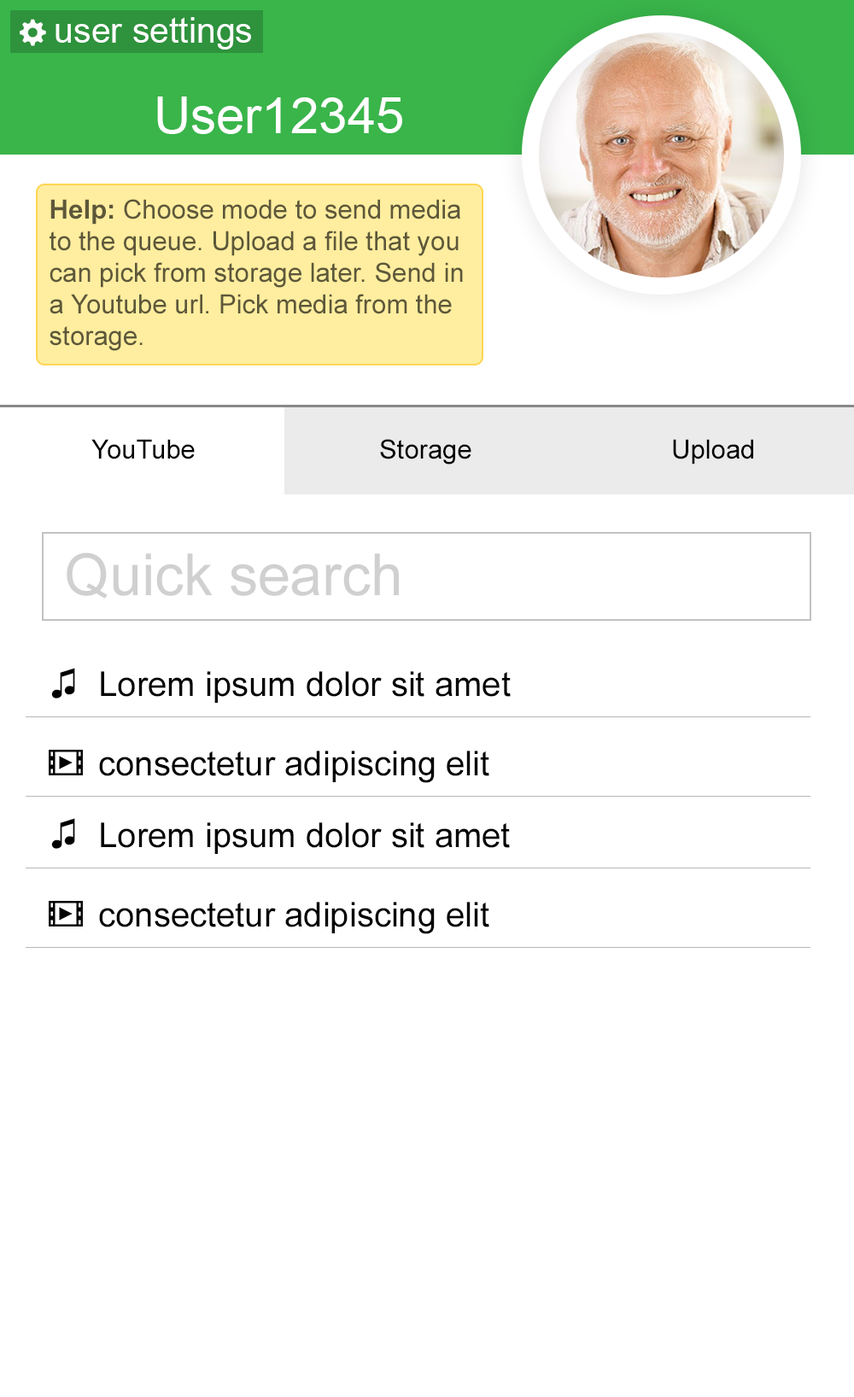
<style>
.page{position:relative;width:854px;height:1397px;background:#ffffff}
.page>*{position:absolute;margin:0}
.t1{font:35.1px "ArialMT";color:#ffffff}
.t2{font:51.2px "ArialMT";color:#ffffff}
.t3{font:26.5px "ArialMT";color:#5d573a}
.t4{font:26.5px "Arial-BoldMT";color:#5d573a}
.t5{font:26.5px "ArialMT";color:#000000}
.t6{font:58px "ArialMT";color:#d0d0d0}
.t7{font:37.6px "ArialMT";color:#000000}
.t8{font:34.1px "ArialMT";color:#000000}
.t9{font:37.5px "ArialMT";color:#000000}
</style>
<div class="page">
<p class="t1" style="left:55px;top:17px;width:196px;height:33px">user settings</p>
<p class="t2" style="left:157px;top:96px;width:245px;height:38px">User12345</p>
<p class="t3" style="left:50px;top:199px;width:413px;height:152px"><span class="t4">Help:</span> Choose mode to send media to the queue. Upload a file that you can pick from storage later. Send in a Youtube url. Pick media from the storage.</p>
<p class="t5" style="left:91px;top:439px;width:104px;height:20px">YouTube</p>
<p class="t5" style="left:380px;top:439px;width:91px;height:25px">Storage</p>
<p class="t5" style="left:673px;top:439px;width:80px;height:25px">Upload</p>
<p class="t6" style="left:67px;top:552px;width:332px;height:46px">Quick search</p>
<p class="t7" style="left:51px;top:668px;width:24px;height:30px">♫</p>
<p class="t8" style="left:101px;top:671px;width:410px;height:32px">Lorem ipsum dolor sit amet</p>
<p class="t8" style="left:99px;top:750px;width:390px;height:33px">consectetur adipiscing elit</p>
<p class="t9" style="left:51px;top:818px;width:24px;height:31px">♫</p>
<p class="t8" style="left:101px;top:822px;width:409px;height:32px">Lorem ipsum dolor sit amet</p>
<p class="t8" style="left:99px;top:902px;width:390px;height:32px">consectetur adipiscing elit</p>
</div>
